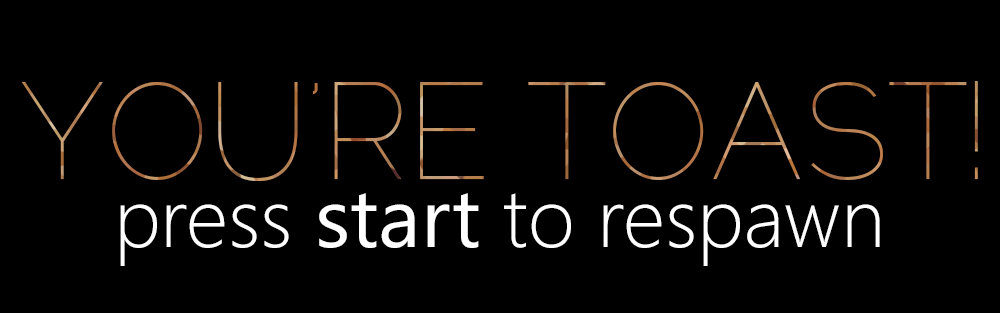
<style>
.page{position:relative;width:1000px;height:313px;background:#000000}
.page>*{position:absolute;margin:0}
.t1{font:136px "Raleway-Thin"}
.t2{font:83px "SegoeUI-Light";color:#ffffff}
.t3{font:83px "SegoeUI";color:#ffffff}
</style>
<div class="page">
<p class="t1" style="left:21px;top:81px;width:957px;height:100px">YOU’RE TOAST!</p>
<p class="t2" style="left:120px;top:193px;width:760px;height:73px">press <span class="t3">start</span> to respawn</p>
</div>
